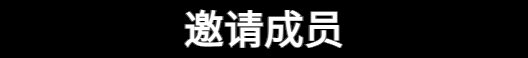
<style>
.page{position:relative;width:528px;height:58px;background:#000000}
.page>*{position:absolute;margin:0}
.t1{font:40px "WebPSD-18463539-0-Regular";color:#ffffff;font-weight:bold}
</style>
<div class="page">
<p class="t1" style="left:0px;top:0px;width:528px;height:58px">邀请成员</p>
</div>
